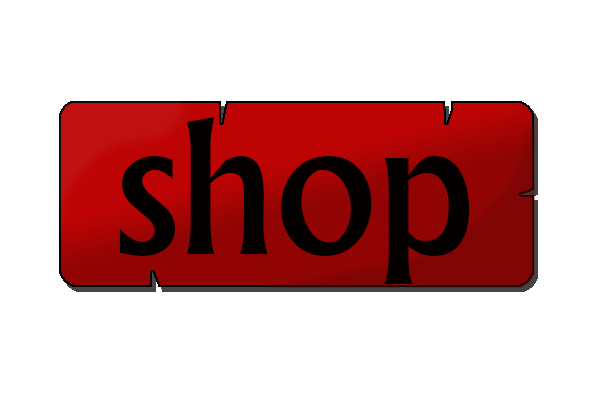
<style>
.page{position:relative;width:600px;height:400px;background:#ffffff}
.page>*{position:absolute;margin:0}
.t1{font:200px "Narkisim";color:#050000}
</style>
<div class="page">
<p class="t1" style="left:119px;top:117px;width:351px;height:167px">shop</p>
</div>
